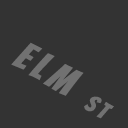
<style>
.page{position:relative;width:128px;height:128px;background:#333333}
.page>*{position:absolute;margin:0}
.t1{font:40px "Bangers-Regular";letter-spacing:0.16em;color:#717171}
.t2{font:24px "Bangers-Regular";letter-spacing:0.16em;color:#717171}
</style>
<div class="page">
<p class="t1" style="left:11px;top:42px;width:103px;height:77px;rotate:31deg">ELM <span class="t2">st</span></p>
</div>
